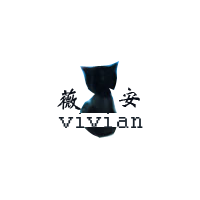
<style>
.page{position:relative;width:200px;height:200px;background:#ffffff}
.page>*{position:absolute;margin:0}
.t1{font:25px "STXinwei";color:#0b0f18}
</style>
<div class="page">
<p class="t1" style="left:57px;top:88px;width:24px;height:22px">薇</p>
<p class="t1" style="left:119px;top:87px;width:21px;height:21px">安</p>
</div>
